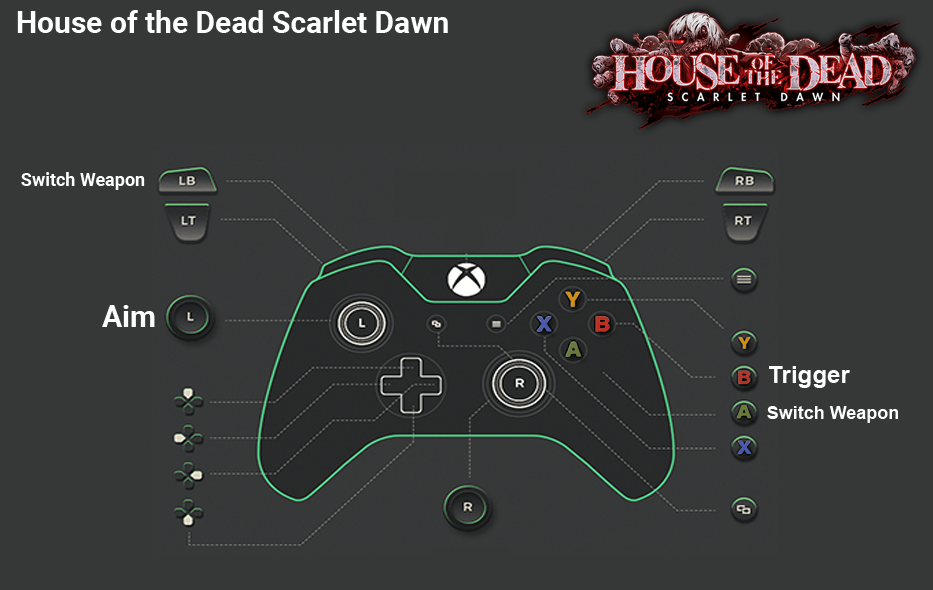
<style>
.page{position:relative;width:933px;height:590px;background:#363838}
.page>*{position:absolute;margin:0}
.t1{font:30px "Roboto-Bold";color:#ffffff}
.t2{font:18px "Roboto-Bold";color:#ffffff}
.t3{font:30px "Roboto-Bold";color:#fefefe}
.t4{font:24px "Arial-BoldMT";color:#fefefe}
.t5{font:18px "Arial-BoldMT";color:#fefefe}
</style>
<div class="page">
<p class="t1" style="left:17px;top:10px;width:431px;height:23px">House of the Dead Scarlet Dawn</p>
<p class="t2" style="left:21px;top:172px;width:124px;height:18px">Switch Weapon</p>
<p class="t3" style="left:102px;top:305px;width:53px;height:22px">Aim</p>
<p class="t4" style="left:769px;top:366px;width:81px;height:22px">Trigger</p>
<p class="t5" style="left:767px;top:406px;width:131px;height:17px">Switch Weapon</p>
</div>
